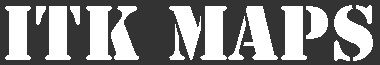
<style>
.page{position:relative;width:380px;height:65px;background:#333333}
.page>*{position:absolute;margin:0}
.t1{font:72px "StencilStd";color:#ffffff}
</style>
<div class="page">
<p class="t1" style="left:5px;top:5px;width:368px;height:56px">ITK Maps</p>
</div>
